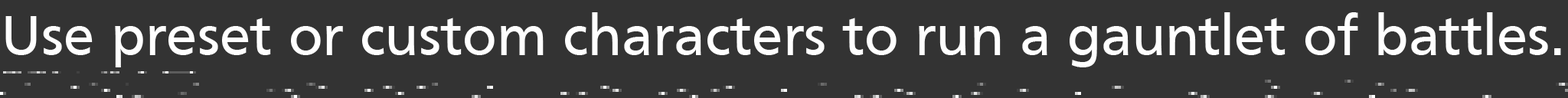
<style>
.page{position:relative;width:1568px;height:98px;background:#333333}
.page>*{position:absolute;margin:0}
.t1{font:59px "Frutiger";color:#ffffff}
</style>
<div class="page">
<p class="t1" style="left:5px;top:12px;width:1556px;height:55px">Use preset or custom characters to run a gauntlet of battles.</p>
</div>
